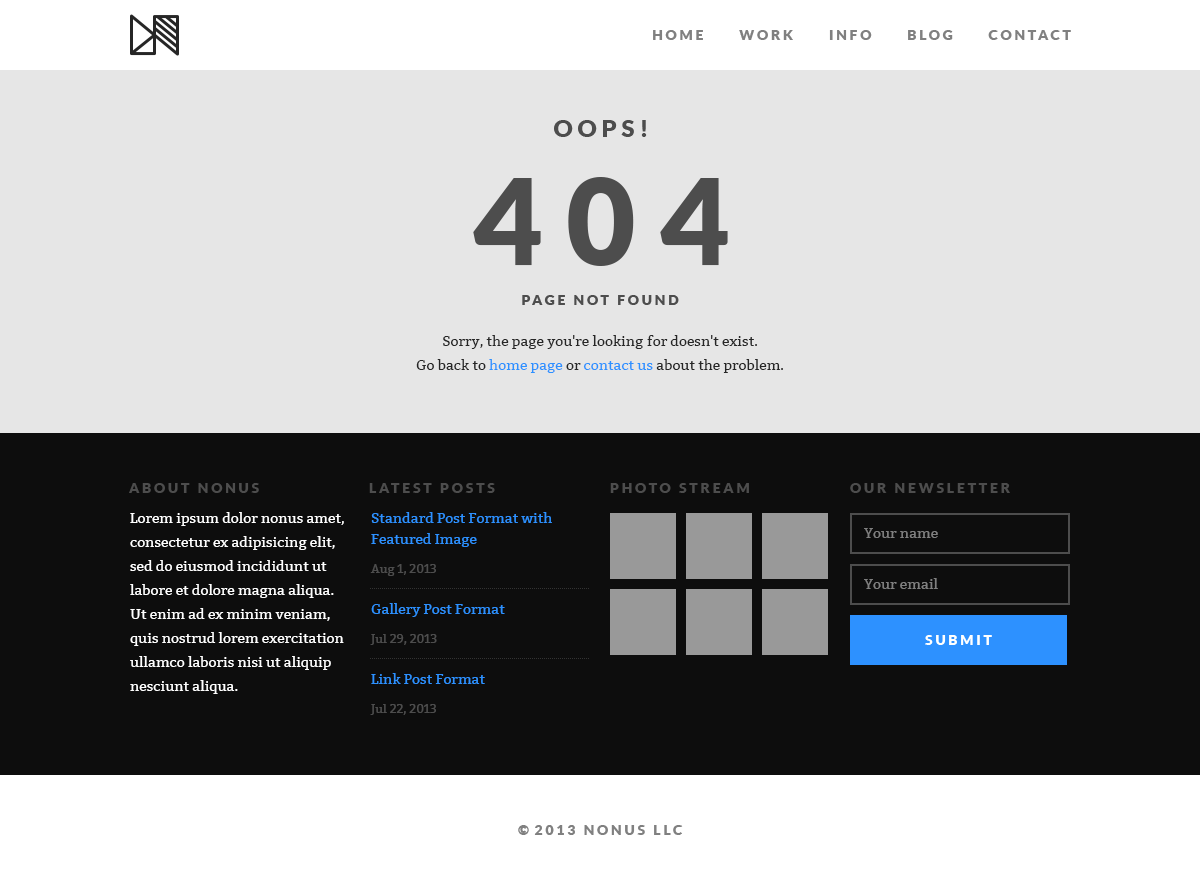
<style>
.page{position:relative;width:1200px;height:885px;background:#e6e6e6}
.page>*{position:absolute;margin:0}
.t1{font:14px "Lato-Black";letter-spacing:0.2em;color:#808080;text-transform:uppercase}
.t2{font:24px "Lato-Black";letter-spacing:0.2em;color:#4d4d4d;text-transform:uppercase}
.t3{font:120px "Lato-Black";letter-spacing:0.2em;color:#4d4d4d;text-transform:uppercase}
.t4{font:14px "Lato-Black";letter-spacing:0.2em;color:#4d4d4d;text-transform:uppercase}
.t5{font:14px/24px "Bitter-Regular";color:#262626}
.t6{font:14px/24px "Bitter-Regular";color:#2d91ff}
.t7{font:14px/24px "Bitter-Regular";color:#ffffff}
.t8{font:14px/21px "Bitter-Regular";color:#2d91ff}
.t9{font:12px/29px "Bitter-Regular";color:#4d4d4d}
.t10{font:14px "Bitter-Regular";color:#808080}
.t11{font:14px "Lato-Black";letter-spacing:0.2em;color:#ffffff;text-transform:uppercase}
</style>
<div class="page">
<p class="t1" style="left:653px;top:30px;width:418px;height:10px">Home      Work      Info      Blog      Contact</p>
<p class="t2" style="left:554px;top:120px;width:93px;height:17px">Oops!</p>
<p class="t3" style="left:473px;top:177px;width:255px;height:89px">404</p>
<p class="t4" style="left:522px;top:295px;width:157px;height:10px">Page Not Found</p>
<p class="t5" style="left:416px;top:335px;width:367px;height:38px;text-align:center">Sorry, the page you're looking for doesn't exist.<br>Go back to <span class="t6">home page</span> or <span class="t6">contact us</span> about the problem.</p>
<p class="t4" style="left:129px;top:483px;width:130px;height:10px">About Nonus</p>
<p class="t4" style="left:369px;top:483px;width:126px;height:10px">Latest Posts</p>
<p class="t4" style="left:610px;top:483px;width:139px;height:10px">Photo Stream</p>
<p class="t4" style="left:850px;top:483px;width:160px;height:10px">Our Newsletter</p>
<p class="t7" style="left:130px;top:512px;width:214px;height:182px">Lorem ipsum dolor nonus amet, consectetur ex adipisicing elit, sed do eiusmod incididunt ut labore et dolore magna aliqua. Ut enim ad ex minim veniam, quis nostrud lorem exercitation ullamco laboris nisi ut aliquip nesciunt aliqua.</p>
<p class="t8" style="left:370px;top:512px;width:182px;height:64px">Standard Post Format with Featured Image<br><span class="t9">Aug 1, 2013</span></p>
<p class="t10" style="left:864px;top:528px;width:74px;height:10px">Your name</p>
<p class="t10" style="left:864px;top:578px;width:74px;height:11px">Your email</p>
<p class="t8" style="left:370px;top:603px;width:135px;height:42px">Gallery Post Format<br><span class="t9">Jul 29, 2013</span></p>
<p class="t11" style="left:925px;top:635px;width:67px;height:10px">Submit</p>
<p class="t8" style="left:370px;top:673px;width:115px;height:42px">Link Post Format<br><span class="t9">Jul 22, 2013</span></p>
<p class="t1" style="left:518px;top:825px;width:165px;height:10px">© 2013 Nonus LLC</p>
</div>
